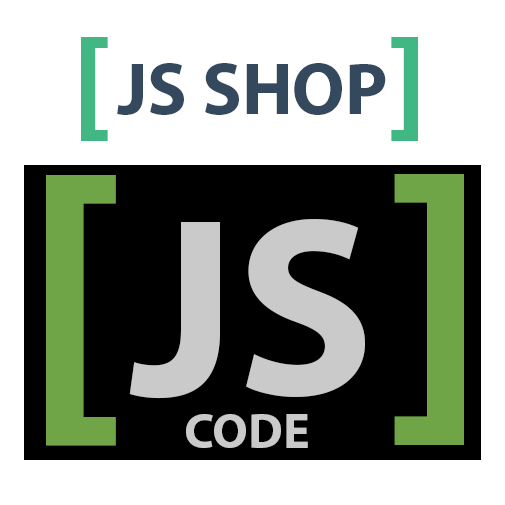
<style>
.page{position:relative;width:505px;height:505px;background:#ffffff}
.page>*{position:absolute;margin:0}
.t1{font:130.5px "MyriadPro-Bold";color:#41b883}
.t2{font:73.5px "MyriadPro-Bold";color:#34495e}
.t3{font:340px "MyriadPro-Bold";color:#6fa547}
.t4{font:257px "MyriadPro-Bold";color:#cacaca}
.t5{font:50px "MyriadPro-Bold";color:#cacaca}
</style>
<div class="page">
<p class="t1" style="left:81px;top:37px;width:27px;height:104px">[</p>
<p class="t1" style="left:391px;top:37px;width:27px;height:104px">]</p>
<p class="t2" style="left:117px;top:63px;width:269px;height:52px">JS SHOP</p>
<p class="t3" style="left:394px;top:174px;width:70px;height:271px">]</p>
<p class="t3" style="left:46px;top:175px;width:70px;height:271px">[</p>
<p class="t4" style="left:129px;top:219px;width:236px;height:180px">JS</p>
<p class="t5" style="left:186px;top:414px;width:122px;height:34px">CODE</p>
</div>
